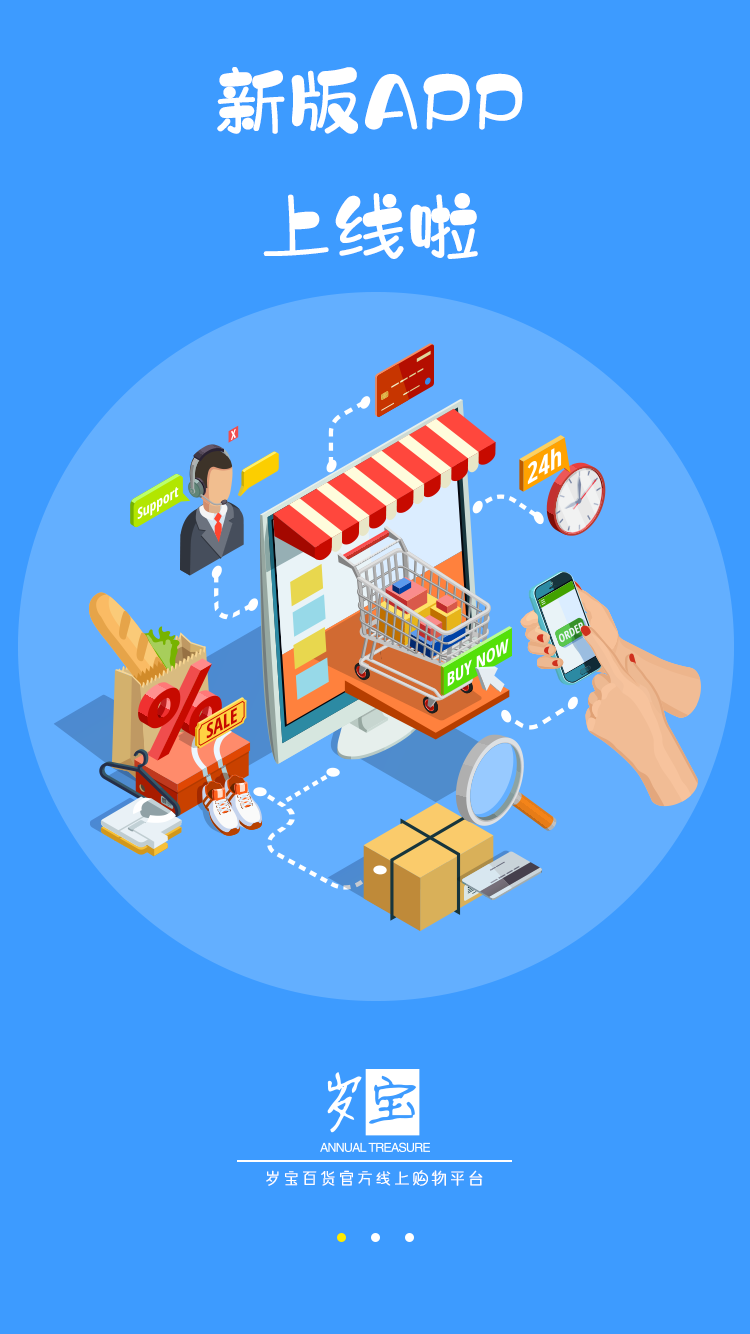
<style>
.page{position:relative;width:750px;height:1334px;background:#3d9bff}
.page>*{position:absolute;margin:0}
.t1{font:72px "HYZiYanKaTongW";color:#ffffff;font-weight:bold}
.t2{font:18px "HYYouYuanTiW";color:#ffffff;font-weight:bold}
</style>
<div class="page">
<p class="t1" style="left:217px;top:67px;width:306px;height:192px;text-align:center">新版APP<br>上线啦</p>
<p class="t2" style="left:266px;top:1170px;width:217px;height:16px">岁宝百货官方线上购物平台</p>
</div>
